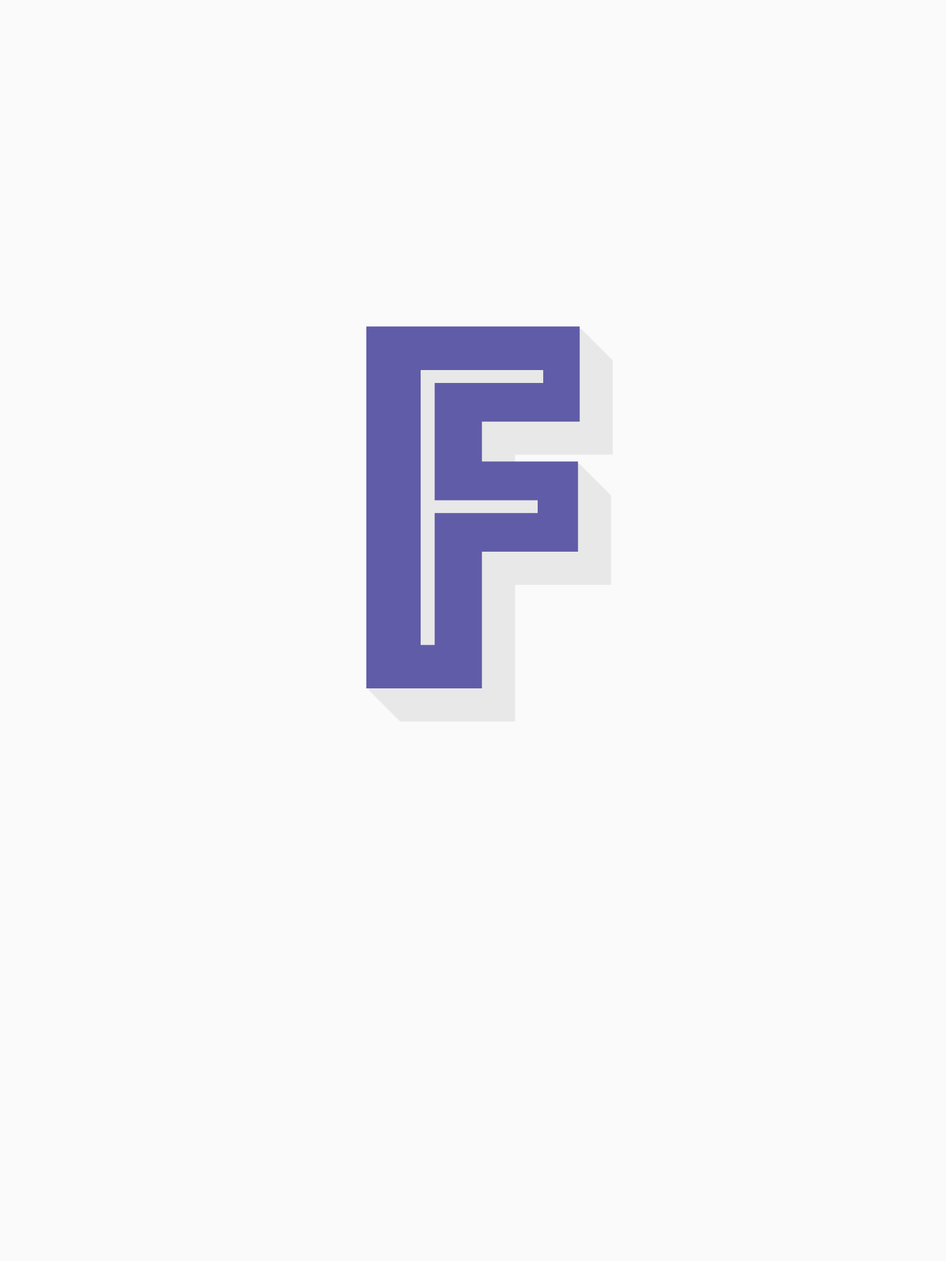
<style>
.page{position:relative;width:946px;height:1261px;background:#fafafa}
.page>*{position:absolute;margin:0}
.t1{font:542.2px "Phosphate-Inline";color:#605ca8}
</style>
<div class="page">
<p class="t1" style="left:366px;top:326px;width:214px;height:362px">F</p>
</div>
